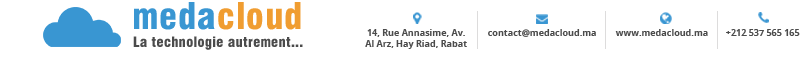
<style>
.page{position:relative;width:800px;height:70px;background:#ffffff}
.page>*{position:absolute;margin:0}
.t1{font:36px "Swiss721BT-BlackCondensed";letter-spacing:0.025em;color:#f09d31}
.t2{font:36px "Swiss721BT-BlackCondensed";letter-spacing:0.025em;color:#3996d2}
.t3{font:9px "OpenSans-Bold";color:#4b4b4b}
.t4{font:14px "Swiss721BT-BlackCondensed";letter-spacing:0.025em;color:#4b4b4b}
</style>
<div class="page">
<p class="t1" style="left:134px;top:2px;width:167px;height:28px"><span class="t2">meda</span>cloud</p>
<p class="t3" style="left:365px;top:29px;width:102px;height:20px;text-align:center">14, Rue Annasime, Av. Al Arz, Hay Riad, Rabat</p>
<p class="t3" style="left:488px;top:29px;width:108px;height:8px">contact@medacloud.ma</p>
<p class="t3" style="left:615px;top:29px;width:93px;height:7px">www.medacloud.ma</p>
<p class="t3" style="left:726px;top:29px;width:74px;height:7px">+212 537 565 165</p>
<p class="t4" style="left:133px;top:36px;width:170px;height:14px">La technologie autrement...</p>
</div>
